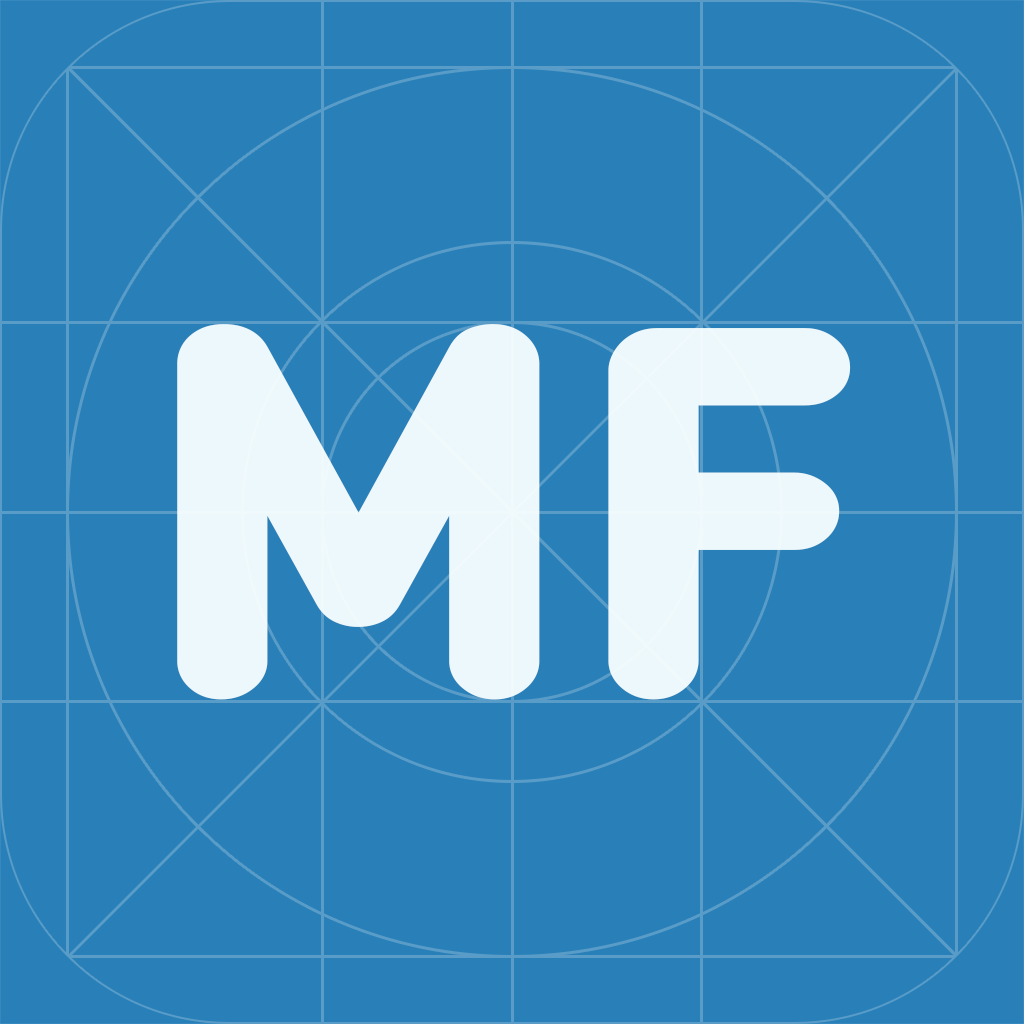
<style>
.page{position:relative;width:1024px;height:1024px;background:#2980b9}
.page>*{position:absolute;margin:0}
.t1{font:500px "BloggerSans-Bold";color:#e8f0f1;font-weight:bold;scale:1.09 1}
</style>
<div class="page">
<p class="t1" style="left:177px;top:324px;width:674px;height:376px">MF</p>
<p class="t1" style="left:177px;top:324px;width:674px;height:376px">MF</p>
</div>
